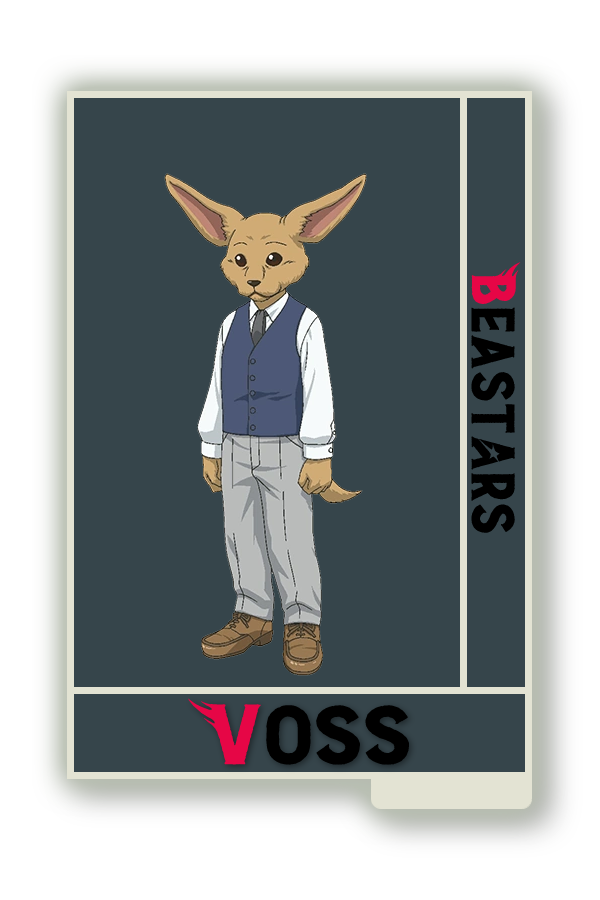
<style>
.page{position:relative;width:600px;height:900px;background:#36454b}
.page>*{position:absolute;margin:0}
.t1{font:48.8px "BEAST";color:#000000}
.t2{font:48.8px "BEAST";color:#e60646}
.t3{font:67px "BEAST";color:#000000;scale:1.12 1}
.t4{font:67px "BEAST";color:#e60646;scale:1.12 1}
</style>
<div class="page">
<p class="t1" style="left:471px;top:262px;width:50px;height:271px;rotate:90deg"><span class="t2">B</span>east@rs</p>
<p class="t3" style="left:188px;top:698px;width:222px;height:67px"><span class="t4">V</span>oss</p>
</div>
